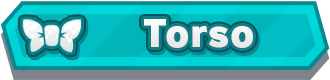
<style>
.page{position:relative;width:330px;height:80px}
.page>*{position:absolute;margin:0}
.t1{font:36px "RodinPro-UB";letter-spacing:0.014em;color:#f1f1f1}
</style>
<div class="page">
<p class="t1" style="left:144px;top:19px;width:109px;height:29px">Torso</p>
</div>
